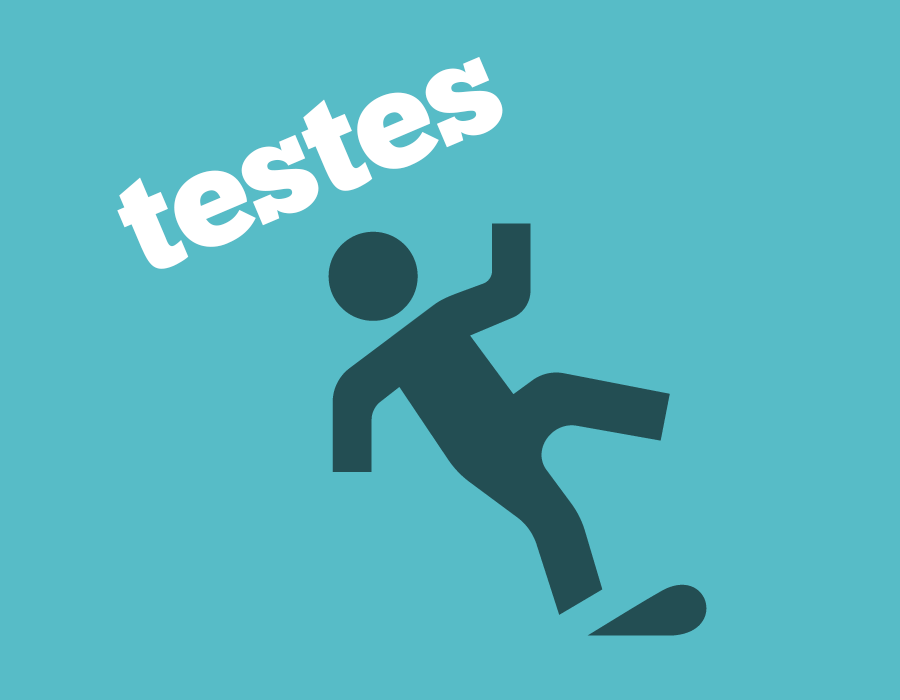
<style>
.page{position:relative;width:900px;height:700px;background:#57bcc7}
.page>*{position:absolute;margin:0}
.t1{font:140.8px "ChunkFive-Roman";color:#ffffff}
</style>
<div class="page">
<p class="t1" style="left:117px;top:56px;width:386px;height:213px;rotate:-23deg">testes</p>
</div>
